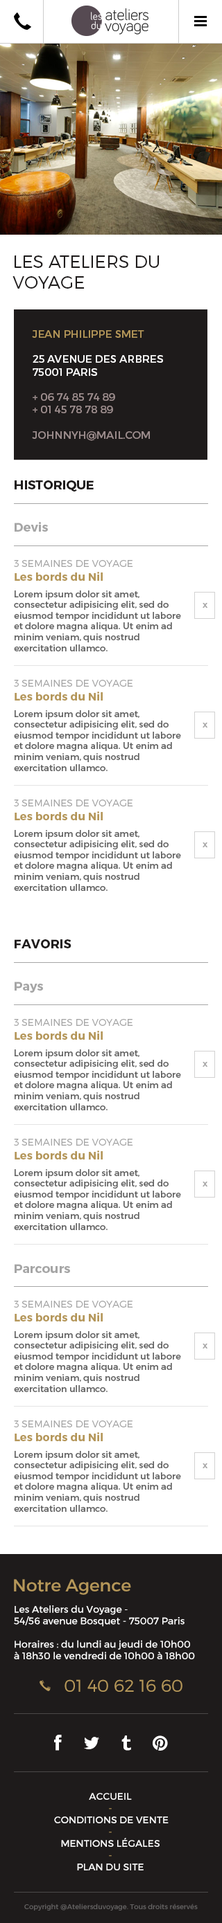
<style>
.page{position:relative;width:222px;height:1923px;background:#ffffff}
.page>*{position:absolute;margin:0}
.t1{font:17.3px "Montserrat-Light";color:#1e1b1b;text-transform:uppercase}
.t2{font:10.5px "Montserrat-Regular";color:#9e8e8e;text-transform:uppercase}
.t3{font:10.5px "Montserrat-Regular";color:#b59759;text-transform:uppercase}
.t4{font:10.5px "Montserrat-Regular";color:#ffffff;text-transform:uppercase}
.t5{font:12.5px "Montserrat-Bold";color:#1e1b1b;text-transform:uppercase}
.t6{font:12.5px/31.2px "Montserrat-Bold";color:#a6a6a6}
.t7{font:9px "Montserrat-Regular";color:#626262}
.t8{font:9.7px "Montserrat-Light";color:#a6a6a6;text-transform:uppercase}
.t9{font:11.1px "Montserrat-Bold";color:#b59759}
.t10{font:9px/16.6px "Montserrat-Regular";color:#626262}
.t11{font:6.9px "Montserrat-Bold";color:#a8a7a7;text-transform:uppercase}
.t12{font:12.5px "Montserrat-Bold";color:#a6a6a6}
.t13{font:17.3px "Montserrat-Regular";color:#b59759}
.t14{font:9.7px "Montserrat-Regular";color:#ffffff}
.t15{font:17.2px "Montserrat-Light";color:#b59759}
.t16{font:9.7px/11.8px "Montserrat-Regular";color:#ffffff;text-transform:uppercase}
.t17{font:9.7px/11.8px "Montserrat-Regular";color:#b59759;text-transform:uppercase}
.t18{font:6.9px "Montserrat-Regular";color:#646262}
</style>
<div class="page">
<p class="t1" style="left:12px;top:255px;width:147px;height:34px">LES ATELIERS DU<br>VOYAGE</p>
<p class="t2" style="left:32px;top:330px;width:131px;height:111px"><span class="t3">jean philippe smet<br><br></span><span class="t4">25 avenue des arbres 75001 Paris<br><br></span>+ 06 74 85 74 89 <br>+ 01 45 78 78 89<br><br>johnnyH@mail.com</p>
<p class="t5" style="left:15px;top:480px;width:78px;height:52px">Historique<br><br><span class="t6">Devis</span></p>
<p class="t7" style="left:14px;top:560px;width:167px;height:91px"><span class="t8">3 semaines de voyage<br></span><span class="t9">Les bords du Nil<br></span><span class="t10">Lorem ipsum dolor sit amet, </span>consectetur adipisicing elit, sed do eiusmod tempor incididunt ut labore et dolore magna aliqua. Ut enim ad minim veniam, quis nostrud exercitation ullamco.</p>
<p class="t11" style="left:202px;top:603px;width:6px;height:5px">X</p>
<p class="t7" style="left:14px;top:680px;width:167px;height:91px"><span class="t8">3 semaines de voyage<br></span><span class="t9">Les bords du Nil<br></span><span class="t10">Lorem ipsum dolor sit amet, </span>consectetur adipisicing elit, sed do eiusmod tempor incididunt ut labore et dolore magna aliqua. Ut enim ad minim veniam, quis nostrud exercitation ullamco.</p>
<p class="t11" style="left:202px;top:723px;width:6px;height:5px">X</p>
<p class="t7" style="left:14px;top:800px;width:167px;height:91px"><span class="t8">3 semaines de voyage<br></span><span class="t9">Les bords du Nil<br></span><span class="t10">Lorem ipsum dolor sit amet, </span>consectetur adipisicing elit, sed do eiusmod tempor incididunt ut labore et dolore magna aliqua. Ut enim ad minim veniam, quis nostrud exercitation ullamco.</p>
<p class="t11" style="left:202px;top:843px;width:6px;height:4px">X</p>
<p class="t5" style="left:15px;top:939px;width:56px;height:54px">favoris<br><br><span class="t6">Pays</span></p>
<p class="t7" style="left:14px;top:1019px;width:167px;height:91px"><span class="t8">3 semaines de voyage<br></span><span class="t9">Les bords du Nil<br></span><span class="t10">Lorem ipsum dolor sit amet, </span>consectetur adipisicing elit, sed do eiusmod tempor incididunt ut labore et dolore magna aliqua. Ut enim ad minim veniam, quis nostrud exercitation ullamco.</p>
<p class="t11" style="left:202px;top:1062px;width:6px;height:5px">X</p>
<p class="t7" style="left:14px;top:1139px;width:167px;height:91px"><span class="t8">3 semaines de voyage<br></span><span class="t9">Les bords du Nil<br></span><span class="t10">Lorem ipsum dolor sit amet, </span>consectetur adipisicing elit, sed do eiusmod tempor incididunt ut labore et dolore magna aliqua. Ut enim ad minim veniam, quis nostrud exercitation ullamco.</p>
<p class="t11" style="left:202px;top:1182px;width:6px;height:5px">X</p>
<p class="t12" style="left:15px;top:1264px;width:55px;height:9px">Parcours</p>
<p class="t7" style="left:14px;top:1301px;width:167px;height:91px"><span class="t8">3 semaines de voyage<br></span><span class="t9">Les bords du Nil<br></span><span class="t10">Lorem ipsum dolor sit amet, </span>consectetur adipisicing elit, sed do eiusmod tempor incididunt ut labore et dolore magna aliqua. Ut enim ad minim veniam, quis nostrud exercitation ullamco.</p>
<p class="t11" style="left:202px;top:1344px;width:6px;height:5px">X</p>
<p class="t7" style="left:14px;top:1421px;width:167px;height:91px"><span class="t8">3 semaines de voyage<br></span><span class="t9">Les bords du Nil<br></span><span class="t10">Lorem ipsum dolor sit amet, </span>consectetur adipisicing elit, sed do eiusmod tempor incididunt ut labore et dolore magna aliqua. Ut enim ad minim veniam, quis nostrud exercitation ullamco.</p>
<p class="t11" style="left:202px;top:1464px;width:6px;height:4px">X</p>
<p class="t13" style="left:14px;top:1579px;width:117px;height:16px">Notre Agence</p>
<p class="t14" style="left:14px;top:1605px;width:181px;height:54px">Les Ateliers du Voyage - <br>54/56 avenue Bosquet - 75007 Paris<br><br>Horaires : du lundi au jeudi de 10h00 <br>à 18h30 le vendredi de 10h00 à 18h00</p>
<p class="t15" style="left:64px;top:1680px;width:118px;height:12px">01 40 62 16 60</p>
<p class="t16" style="left:54px;top:1793px;width:114px;height:78px;text-align:center">Accueil<br><span class="t17">-<br> </span>Conditions de vente<br><span class="t17">-<br></span>Mentions légales<br><span class="t17">-<br></span>Plan du site</p>
<p class="t18" style="left:24px;top:1904px;width:173px;height:7px">Copyright @Ateliersduvoyage. Tous droits réservés</p>
</div>
